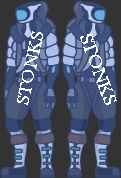
<style>
.page{position:relative;width:121px;height:178px;background:#333333}
.page>*{position:absolute;margin:0}
.t1{font:18.8px "BaskOldFace";color:#ffffff}
</style>
<div class="page">
<p class="t1" style="left:17px;top:31px;width:26px;height:74px;rotate:-77deg">STONKS</p>
<p class="t1" style="left:80px;top:34px;width:37px;height:71px;rotate:70deg">STONKS</p>
</div>
